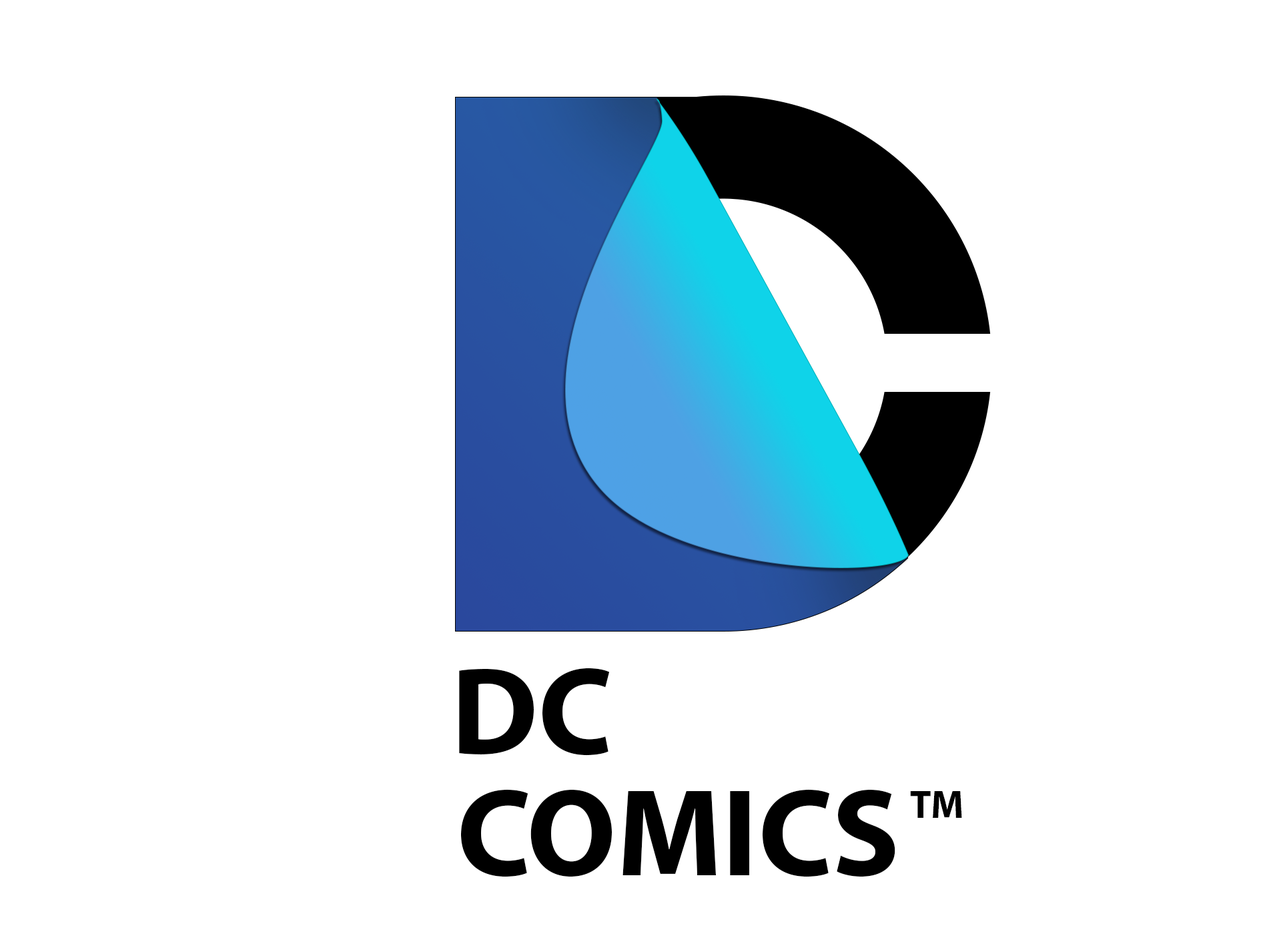
<style>
.page{position:relative;width:1261px;height:946px;background:#ffffff}
.page>*{position:absolute;margin:0}
.t1{font:125.1px "MyriadPro-Bold";color:#000000}
.t2{font:38.9px "MyriadPro-Bold";color:#000000}
</style>
<div class="page">
<p class="t1" style="left:459px;top:667px;width:151px;height:88px">DC</p>
<p class="t1" style="left:461px;top:789px;width:434px;height:88px">COMICS</p>
<p class="t2" style="left:910px;top:791px;width:52px;height:26px">TM</p>
</div>
